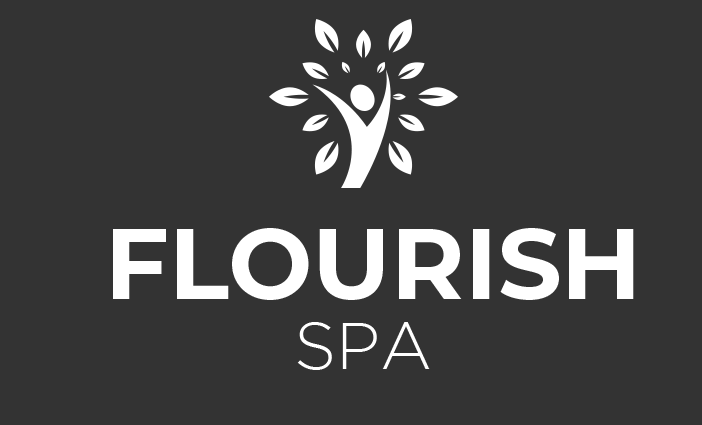
<style>
.page{position:relative;width:702px;height:425px;background:#333333}
.page>*{position:absolute;margin:0}
.t1{font:100px "Montserrat-Bold";color:#ffffff;text-transform:uppercase}
.t2{font:66px "GothamLight";color:#ffffff;text-transform:uppercase}
</style>
<div class="page">
<p class="t1" style="left:113px;top:228px;width:521px;height:72px">Flourish</p>
<p class="t2" style="left:297px;top:322px;width:133px;height:48px">spa</p>
</div>
